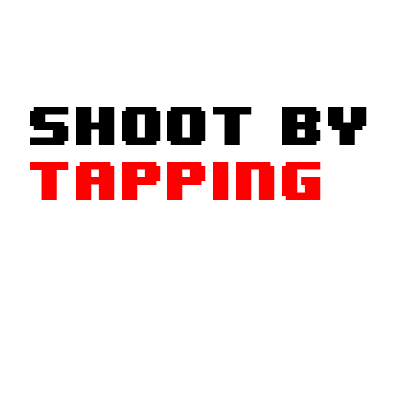
<style>
.page{position:relative;width:400px;height:400px;background:#ffffff}
.page>*{position:absolute;margin:0}
.t1{font:45.8px "8BITWONDERNominal";color:#000000}
.t2{font:45.8px "8BITWONDERNominal";color:#ff0000}
</style>
<div class="page">
<p class="t1" style="left:30px;top:107px;width:337px;height:93px">shoot by<br><span class="t2">Tapping</span></p>
</div>
